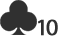
<style>
.page{position:relative;width:58px;height:36px;background:#ffffff}
.page>*{position:absolute;margin:0}
.t1{font:23.4px "MyriadPro-Regular";letter-spacing:-0.1em;color:#303030;font-weight:bold}
</style>
<div class="page">
<p class="t1" style="left:38px;top:19px;width:20px;height:17px">10</p>
</div>
